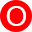
<style>
.page{position:relative;width:32px;height:32px;background:#ff0000}
.page>*{position:absolute;margin:0}
.t1{font:28px "ArialMT";color:#ffffff}
</style>
<div class="page">
<p class="t1" style="left:6px;top:6px;width:20px;height:20px">O</p>
</div>
